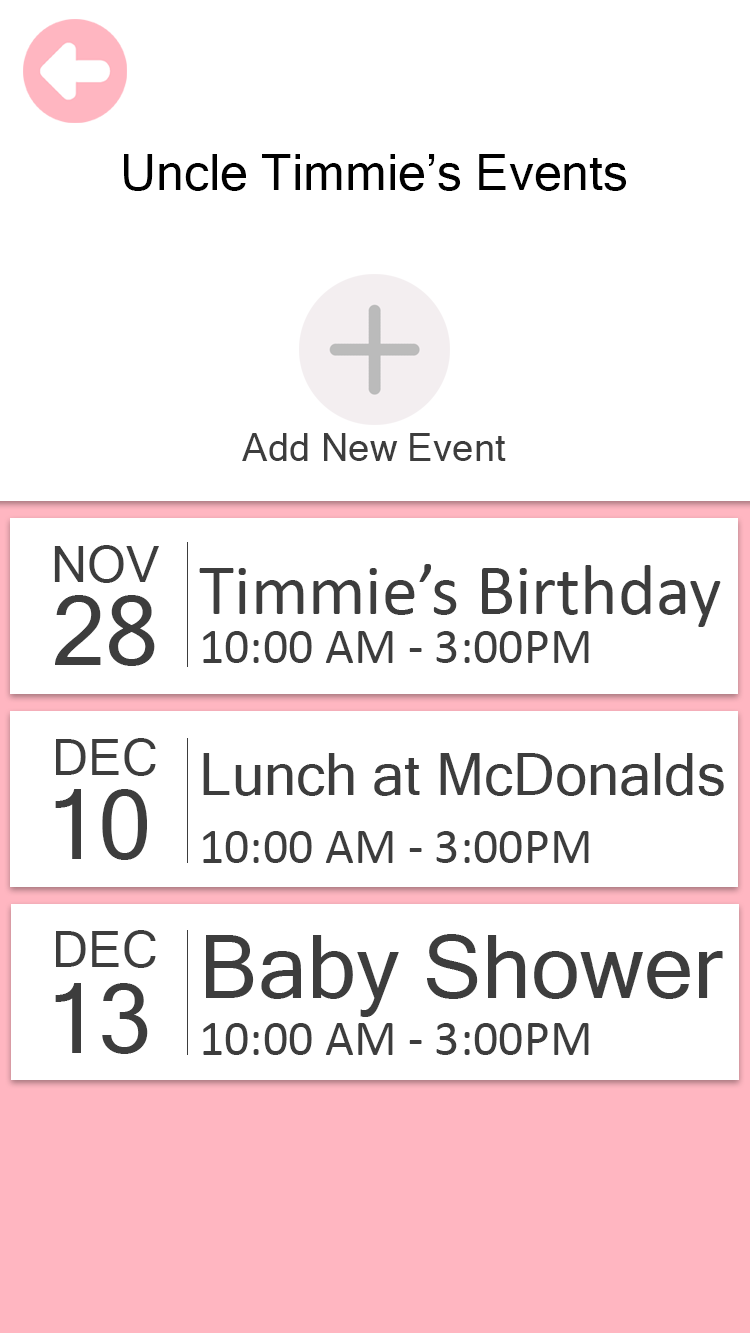
<style>
.page{position:relative;width:750px;height:1334px;background:#ffffff}
.page>*{position:absolute;margin:0}
.t1{font:50px "MicrosoftSansSerif";color:#000000}
.t2{font:38.4px "MicrosoftSansSerif";color:#3d3d3d}
.t3{font:50px "MicrosoftSansSerif";color:#3d3d3d}
.t4{font:71.9px "Calibri";color:#3d3d3d}
.t5{font:96.4px "MicrosoftSansSerif";color:#3d3d3d}
.t6{font:50px "Calibri";color:#3d3d3d}
.t7{font:57.8px "MicrosoftSansSerif";color:#3d3d3d}
.t8{font:88.1px "MicrosoftSansSerif";color:#3d3d3d}
</style>
<div class="page">
<p class="t1" style="left:124px;top:154px;width:503px;height:37px">Uncle Timmie’s Events</p>
<p class="t2" style="left:242px;top:433px;width:264px;height:28px">Add New Event</p>
<p class="t3" style="left:54px;top:545px;width:105px;height:38px">NOV</p>
<p class="t4" style="left:199px;top:564px;width:522px;height:63px">Timmie’s Birthday</p>
<p class="t5" style="left:55px;top:595px;width:100px;height:71px">28</p>
<p class="t6" style="left:203px;top:631px;width:386px;height:32px">10:00 AM - 3:00PM</p>
<p class="t3" style="left:56px;top:738px;width:100px;height:38px">DEC</p>
<p class="t7" style="left:203px;top:753px;width:521px;height:43px">Lunch at McDonalds</p>
<p class="t5" style="left:55px;top:789px;width:92px;height:71px">10</p>
<p class="t6" style="left:203px;top:831px;width:386px;height:32px">10:00 AM - 3:00PM</p>
<p class="t3" style="left:56px;top:930px;width:100px;height:38px">DEC</p>
<p class="t8" style="left:206px;top:934px;width:517px;height:83px">Baby Shower</p>
<p class="t5" style="left:55px;top:983px;width:93px;height:71px">13</p>
<p class="t6" style="left:203px;top:1023px;width:386px;height:32px">10:00 AM - 3:00PM</p>
</div>
